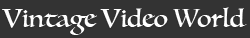
<style>
.page{position:relative;width:250px;height:38px;background:#333333}
.page>*{position:absolute;margin:0}
.t1{font:25px "Luminari-Regular";color:#ffffff}
</style>
<div class="page">
<p class="t1" style="left:2px;top:7px;width:245px;height:28px">Vintage Video World</p>
</div>
